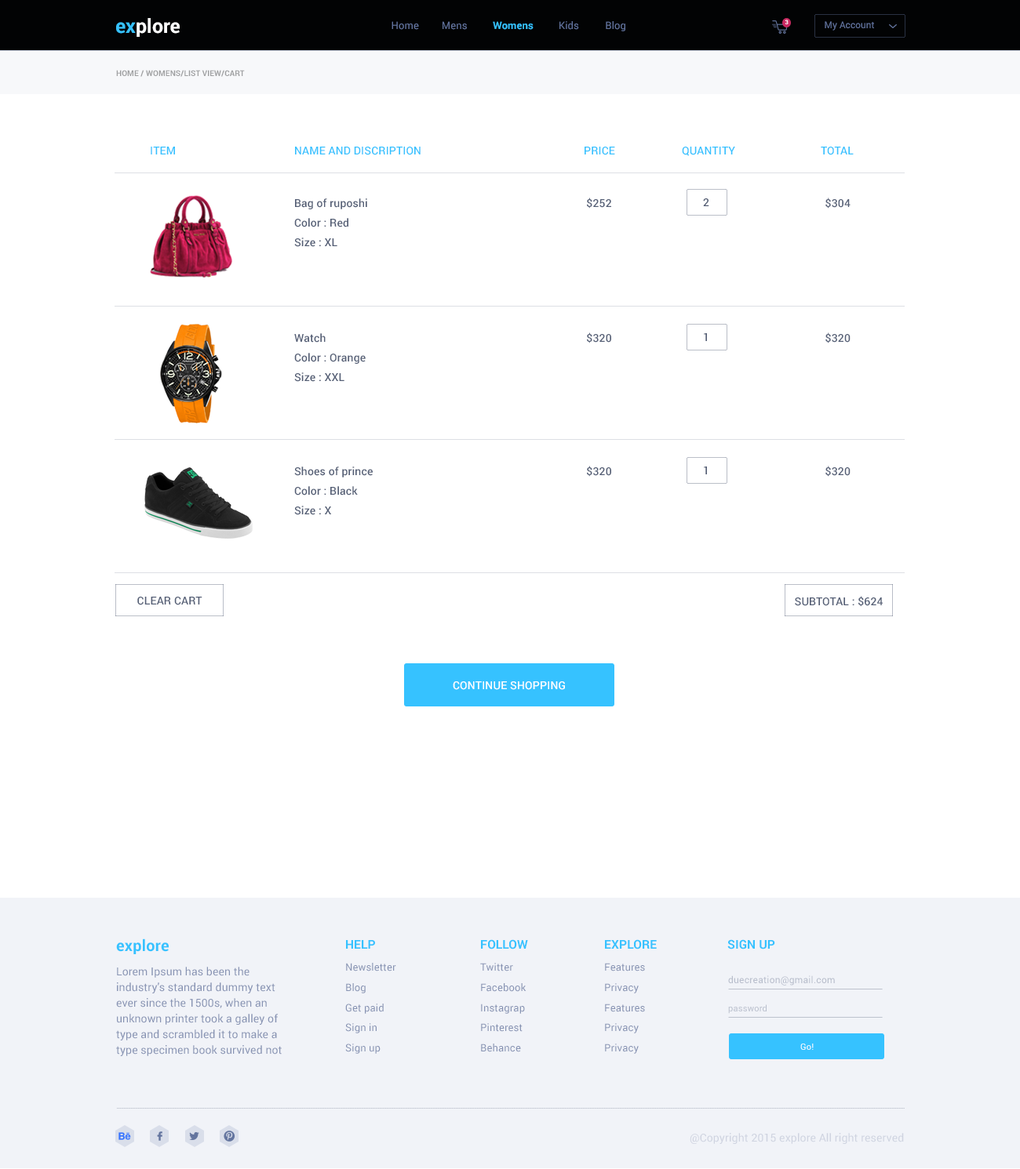
<style>
.page{position:relative;width:1020px;height:1169px;background:#ffffff}
.page>*{position:absolute;margin:0}
.t1{font:19.6px "Roboto-Bold";color:#ffffff}
.t2{font:19.6px "Roboto-Bold";color:#36c2ff}
.t3{font:10.2px "Roboto-Regular";letter-spacing:0.01em;color:#64759f}
.t4{font:10.2px "Roboto-Bold";letter-spacing:0.01em;color:#36c2ff}
.t5{font:6px "Roboto-Bold";letter-spacing:0.01em;color:#ffffff}
.t6{font:9.4px "Roboto-Regular";color:#64759f}
.t7{font:7.8px "Roboto-Bold";letter-spacing:0.01em;color:#9e9fa0}
.t8{font:7.8px "Roboto-Bold";letter-spacing:0.01em;color:#9e9fa0;text-transform:uppercase}
.t9{font:11px "Roboto-Medium";letter-spacing:0.01em;color:#36c2ff;text-transform:uppercase}
.t10{font:11px "Roboto-Medium";letter-spacing:0.01em;color:#555f76}
.t11{font:11px/19.6px "Roboto-Medium";letter-spacing:0.01em;color:#555f76}
.t12{font:11px "Roboto-Medium";letter-spacing:0.01em;color:#ffffff}
.t13{font:15.7px "Roboto-Bold";letter-spacing:0.01em;color:#36c2ff}
.t14{font:10.2px/20.3px "Roboto-Regular";letter-spacing:0.01em;color:#8793b3}
.t15{font:12.1px/21.9px "Roboto-Bold";letter-spacing:0.01em;color:#36c2ff}
.t16{font:10.2px/21.9px "Roboto-Regular";letter-spacing:0.01em;color:#8793b3}
.t17{font:12.1px/21.9px "Roboto-Bold";letter-spacing:0.01em;color:#36c2ff;text-transform:uppercase}
.t18{font:12.1px "Roboto-Bold";letter-spacing:0.01em;color:#36c2ff}
.t19{font:11px/15.7px "Roboto-Regular";letter-spacing:0.01em;color:#8793b3}
.t20{font:11px/21.2px "Roboto-Regular";letter-spacing:0.01em;color:#8793b3}
.t21{font:9.4px "Roboto-Regular";letter-spacing:0.02em;color:#b8becc}
.t22{font:8.6px "Roboto-Regular";letter-spacing:0.02em;color:#b8becc}
.t23{font:8.6px "Roboto-Regular";letter-spacing:0.02em;color:#ffffff}
.t24{font:11px "Roboto-Regular";letter-spacing:0.01em;color:#cfd3e0}
</style>
<div class="page">
<p class="t1" style="left:116px;top:18px;width:64px;height:19px"><span class="t2">ex</span>plore</p>
<p class="t3" style="left:391px;top:21px;width:28px;height:9px">Home</p>
<p class="t3" style="left:442px;top:21px;width:25px;height:9px">Mens</p>
<p class="t4" style="left:493px;top:21px;width:40px;height:9px">Womens</p>
<p class="t3" style="left:559px;top:21px;width:20px;height:9px">Kids</p>
<p class="t3" style="left:606px;top:21px;width:19px;height:10px">Blog</p>
<p class="t5" style="left:784px;top:20px;width:4px;height:4px">3</p>
<p class="t6" style="left:824px;top:21px;width:50px;height:10px">My Account</p>
<p class="t7" style="left:116px;top:70px;width:129px;height:7px">HOME / WOMENS/<span class="t8">list view/cart</span></p>
<p class="t9" style="left:151px;top:147px;width:24px;height:8px">ITEM</p>
<p class="t9" style="left:295px;top:147px;width:125px;height:8px">NAME AND DISCRIPTION</p>
<p class="t9" style="left:584px;top:147px;width:31px;height:8px">PRICE</p>
<p class="t9" style="left:682px;top:147px;width:53px;height:9px">QUANTITY</p>
<p class="t9" style="left:820px;top:147px;width:33px;height:8px">TOTAL</p>
<p class="t10" style="left:587px;top:198px;width:24px;height:11px">$252</p>
<p class="t10" style="left:825px;top:198px;width:25px;height:11px">$304</p>
<p class="t11" style="left:294px;top:198px;width:73px;height:49px">Bag of ruposhi<br>Color : Red<br>Size : XL</p>
<p class="t10" style="left:703px;top:198px;width:6px;height:8px">2</p>
<p class="t11" style="left:294px;top:333px;width:72px;height:49px">Watch<br>Color : Orange<br>Size : XXL</p>
<p class="t10" style="left:587px;top:333px;width:24px;height:11px">$320</p>
<p class="t10" style="left:704px;top:333px;width:3px;height:8px">1</p>
<p class="t10" style="left:825px;top:333px;width:25px;height:11px">$320</p>
<p class="t11" style="left:294px;top:467px;width:79px;height:48px">Shoes of prince<br>Color : Black<br>Size : X</p>
<p class="t10" style="left:587px;top:466px;width:24px;height:11px">$320</p>
<p class="t10" style="left:704px;top:467px;width:3px;height:8px">1</p>
<p class="t10" style="left:825px;top:466px;width:25px;height:11px">$320</p>
<p class="t10" style="left:137px;top:597px;width:65px;height:9px">CLEAR CART</p>
<p class="t10" style="left:795px;top:596px;width:87px;height:11px">SUBTOTAL : $624</p>
<p class="t12" style="left:453px;top:682px;width:112px;height:8px">CONTINUE SHOPPING</p>
<p class="t13" style="left:116px;top:939px;width:53px;height:16px">explore</p>
<p class="t14" style="left:345px;top:940px;width:51px;height:114px"><span class="t15">HELP<br></span><span class="t16">Newsletter<br></span>Blog<br>Get paid<br>Sign in<br>Sign up</p>
<p class="t14" style="left:480px;top:940px;width:48px;height:113px"><span class="t17">Follow<br></span><span class="t16">Twitter<br></span>Facebook<br>Instagrap<br>Pinterest<br>Behance</p>
<p class="t14" style="left:605px;top:940px;width:51px;height:114px"><span class="t17">EXPLORE<br></span><span class="t16">Features<br></span>Privacy<br>Features<br>Privacy<br>Privacy</p>
<p class="t18" style="left:727px;top:940px;width:48px;height:10px">SIGN UP</p>
<p class="t19" style="left:116px;top:967px;width:166px;height:90px"><span class="t20">Lorem Ipsum has been the </span>industry's standard dummy text ever since the 1500s, when an unknown printer took a galley of type and scrambled it to make a type specimen book survived not</p>
<p class="t21" style="left:728px;top:976px;width:107px;height:10px">duecreation@gmail.com</p>
<p class="t22" style="left:728px;top:1005px;width:38px;height:9px">password</p>
<p class="t23" style="left:800px;top:1044px;width:13px;height:6px">Go!</p>
<p class="t24" style="left:689px;top:1133px;width:215px;height:11px">@Copyright 2015 explore All right reserved</p>
</div>
